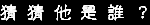
<style>
.page{position:relative;width:150px;height:25px;background:#000000}
.page>*{position:absolute;margin:0}
.t1{font:18px "DFGuYin-W5-WINP-BF";letter-spacing:0.04em;color:#ffffff}
.t2{font:18px "DFGuYin-W5-WINP-BF";letter-spacing:0.04em;color:#fefefe}
</style>
<div class="page">
<p class="t1" style="left:0px;top:4px;width:17px;height:17px">猜</p>
<p class="t1" style="left:0px;top:4px;width:17px;height:17px">猜</p>
<p class="t1" style="left:0px;top:4px;width:17px;height:17px">猜</p>
<p class="t1" style="left:0px;top:4px;width:17px;height:17px">猜</p>
<p class="t1" style="left:0px;top:4px;width:17px;height:17px">猜</p>
<p class="t2" style="left:27px;top:4px;width:17px;height:17px">猜</p>
<p class="t2" style="left:27px;top:4px;width:17px;height:17px">猜</p>
<p class="t2" style="left:27px;top:4px;width:17px;height:17px">猜</p>
<p class="t2" style="left:27px;top:4px;width:17px;height:17px">猜</p>
<p class="t2" style="left:27px;top:4px;width:17px;height:17px">猜</p>
<p class="t1" style="left:54px;top:4px;width:17px;height:17px">他</p>
<p class="t1" style="left:54px;top:4px;width:17px;height:17px">他</p>
<p class="t1" style="left:54px;top:4px;width:17px;height:17px">他</p>
<p class="t1" style="left:54px;top:4px;width:17px;height:17px">他</p>
<p class="t1" style="left:54px;top:4px;width:17px;height:17px">他</p>
<p class="t1" style="left:81px;top:5px;width:16px;height:15px">是</p>
<p class="t1" style="left:81px;top:5px;width:16px;height:15px">是</p>
<p class="t1" style="left:81px;top:5px;width:16px;height:15px">是</p>
<p class="t1" style="left:81px;top:5px;width:16px;height:15px">是</p>
<p class="t1" style="left:81px;top:5px;width:16px;height:15px">是</p>
<p class="t1" style="left:108px;top:4px;width:16px;height:17px">誰</p>
<p class="t1" style="left:108px;top:4px;width:16px;height:17px">誰</p>
<p class="t1" style="left:108px;top:4px;width:16px;height:17px">誰</p>
<p class="t1" style="left:108px;top:4px;width:16px;height:17px">誰</p>
<p class="t1" style="left:108px;top:4px;width:16px;height:17px">誰</p>
<p class="t1" style="left:139px;top:6px;width:8px;height:13px">?</p>
<p class="t1" style="left:139px;top:6px;width:8px;height:13px">?</p>
<p class="t1" style="left:139px;top:6px;width:8px;height:13px">?</p>
<p class="t1" style="left:139px;top:6px;width:8px;height:13px">?</p>
<p class="t1" style="left:139px;top:6px;width:8px;height:13px">?</p>
</div>
